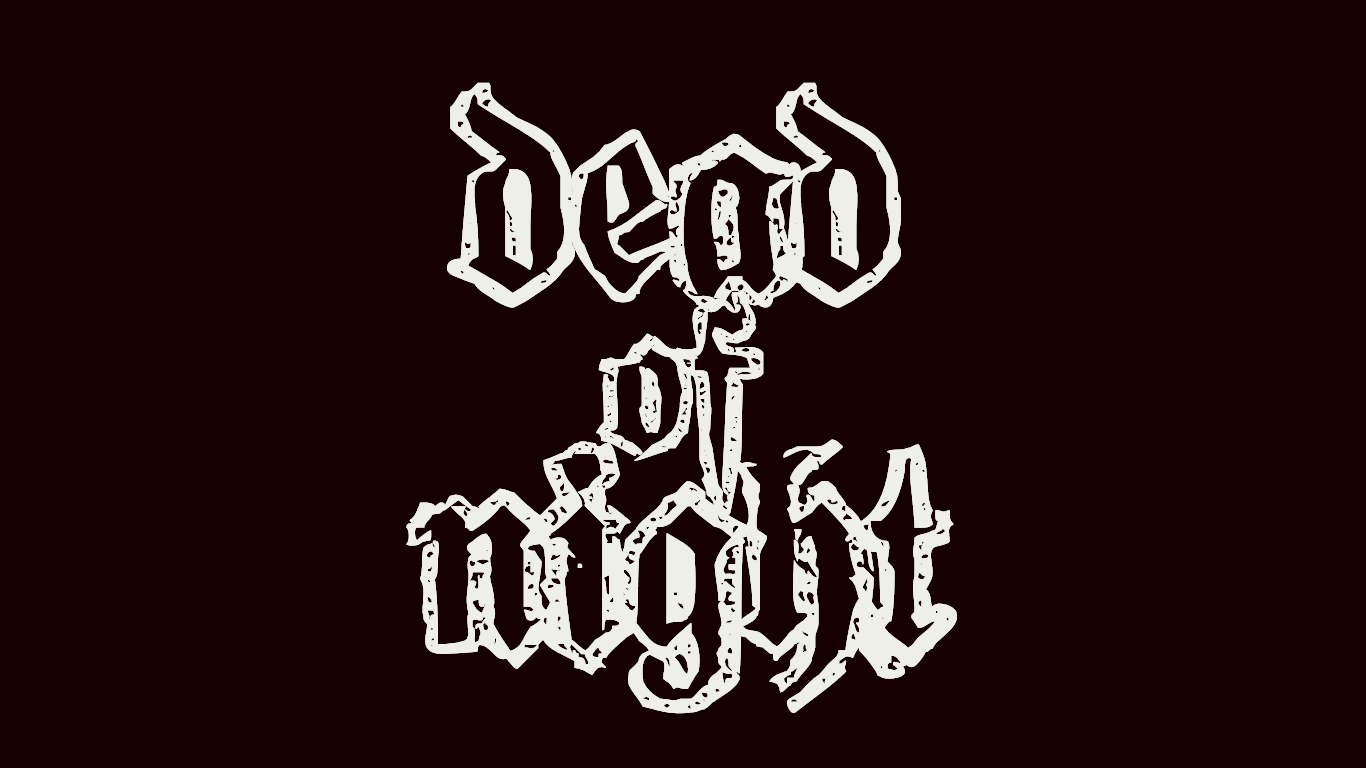
<style>
.page{position:relative;width:1366px;height:768px;background:#170000}
.page>*{position:absolute;margin:0}
.t1{font:300px "FraktapeDuct";color:#eeefe8}
.t2{font:220px "FraktapeDuct";color:#eeefe8}
</style>
<div class="page">
<p class="t1" style="left:447px;top:82px;width:454px;height:231px">dead</p>
<p class="t2" style="left:596px;top:292px;width:168px;height:224px">of</p>
<p class="t1" style="left:406px;top:439px;width:468px;height:275px">nigh</p>
<p class="t1" style="left:794px;top:444px;width:163px;height:235px">t</p>
</div>
